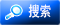
<style>
.page{position:relative;width:60px;height:25px}
.page>*{position:absolute;margin:0}
.t1{font:14px "SimHei";color:#ffffff;scale:0.83 1}
</style>
<div class="page">
<p class="t1" style="left:28px;top:4px;width:23px;height:14px">搜索</p>
</div>
